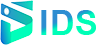
<style>
.page{position:relative;width:96px;height:45px;background:#ffffff}
.page>*{position:absolute;margin:0}
.t1{font:34px "Arial-BoldMT";text-transform:uppercase}
</style>
<div class="page">
<p class="t1" style="left:41px;top:10px;width:55px;height:25px">IDS</p>
</div>
